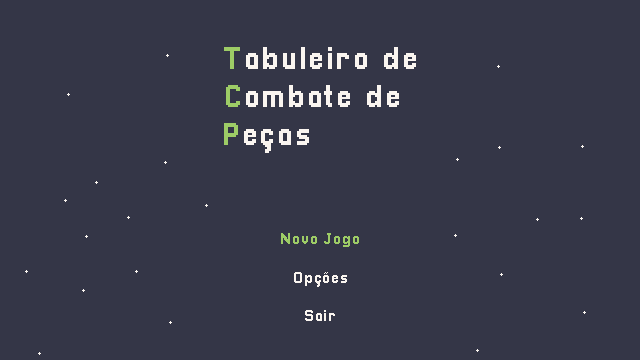
<style>
.page{position:relative;width:640px;height:360px;background:#343647}
.page>*{position:absolute;margin:0}
.t1{font:32px "Pixellari";letter-spacing:0.05em;color:#faf5f0}
.t2{font:32px "Pixellari";letter-spacing:0.05em;color:#9dcc66}
.t3{font:16px "Pixellari";letter-spacing:0.05em;color:#faf5f0}
.t4{font:16px "Pixellari";letter-spacing:0.05em;color:#9dcc66}
</style>
<div class="page">
<p class="t1" style="left:224px;top:47px;width:192px;height:106px"><span class="t2">T</span>abuleiro de <br><span class="t2">C</span>ombate de <br><span class="t2">P</span>eças</p>
<p class="t3" style="left:281px;top:233px;width:78px;height:88px;text-align:center"><span class="t4">Novo Jogo<br></span><br>Opções<br><br>Sair</p>
</div>
